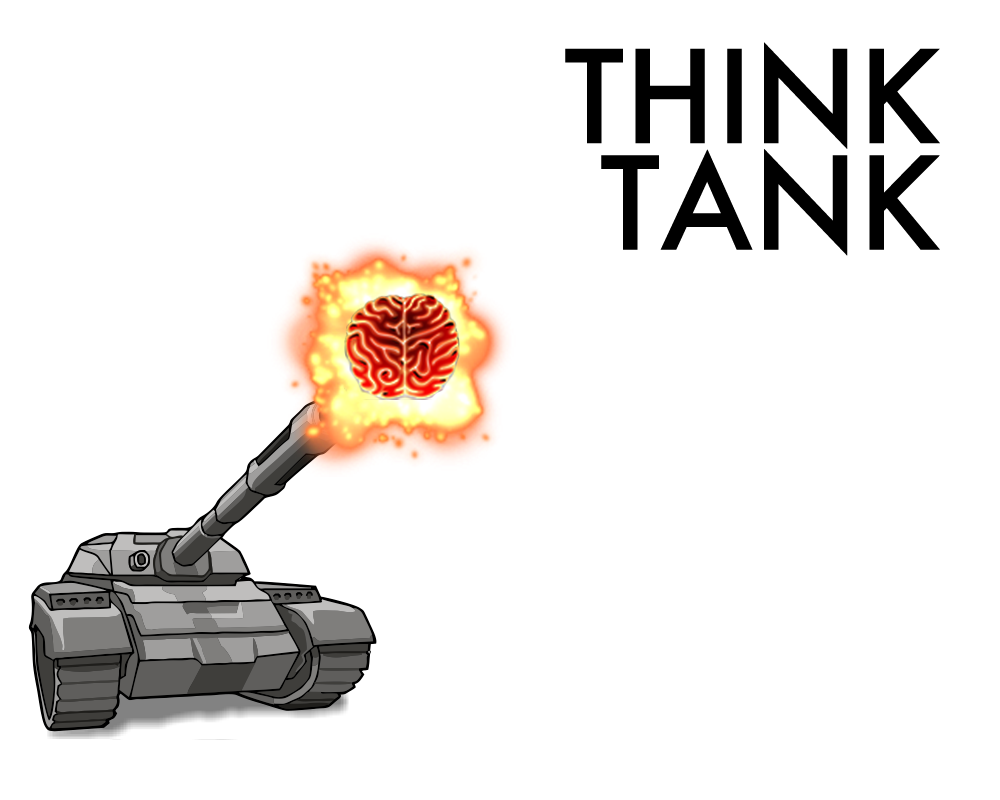
<style>
.page{position:relative;width:1000px;height:800px;background:#ffffff}
.page>*{position:absolute;margin:0}
.t1{font:125px/106.5px "Futura-Medium";color:#000000}
</style>
<div class="page">
<p class="t1" style="left:565px;top:42px;width:375px;height:214px;text-align:right">THINK<br>TANK</p>
</div>
